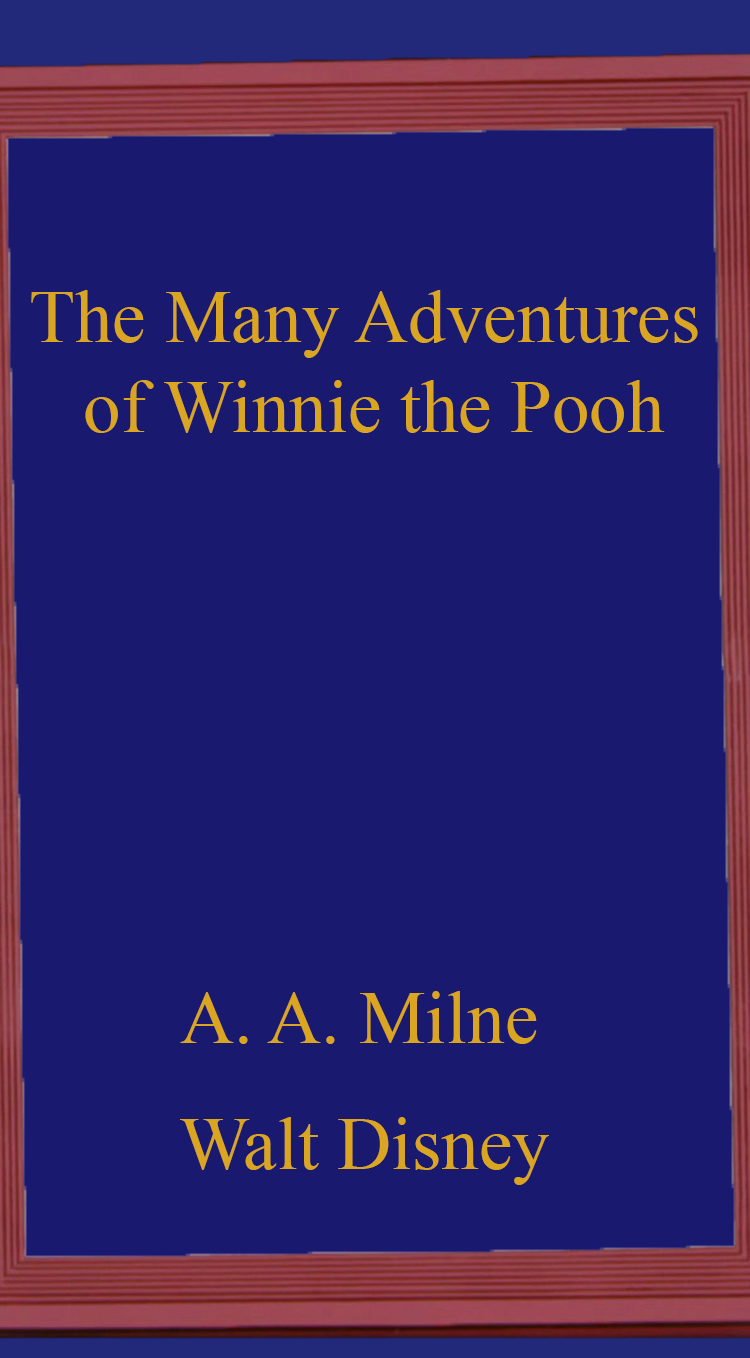
<style>
.page{position:relative;width:750px;height:1358px;background:#191970}
.page>*{position:absolute;margin:0}
.t1{font:75px "TimesNewRomanPSMT";color:#daa520}
</style>
<div class="page">
<p class="t1" style="left:31px;top:290px;width:667px;height:143px;text-align:center">The Many Adventures <br>of Winnie the Pooh</p>
<p class="t1" style="left:180px;top:991px;width:357px;height:53px">A. A. Milne</p>
<p class="t1" style="left:180px;top:1117px;width:369px;height:68px">Walt Disney</p>
</div>
